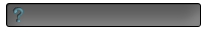
<style>
.page{position:relative;width:210px;height:36px;background:#ffffff}
.page>*{position:absolute;margin:0}
.t1{font:24px "DumbOldTypewriterAlternateBold"}
</style>
<div class="page">
<p class="t1" style="left:12px;top:7px;width:11px;height:15px">?</p>
</div>
